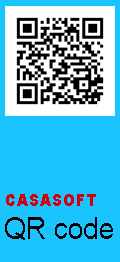
<style>
.page{position:relative;width:120px;height:262px;background:#1cc4ff}
.page>*{position:absolute;margin:0}
.t1{font:16.7px "Arial-Black";color:#d40010;scale:0.9 1}
.t2{font:31.2px "ArialMT";color:#000000;scale:0.9 1}
</style>
<div class="page">
<p class="t1" style="left:6px;top:194px;width:90px;height:12px">CASASOFT</p>
<p class="t2" style="left:5px;top:217px;width:108px;height:23px">QR code</p>
</div>
